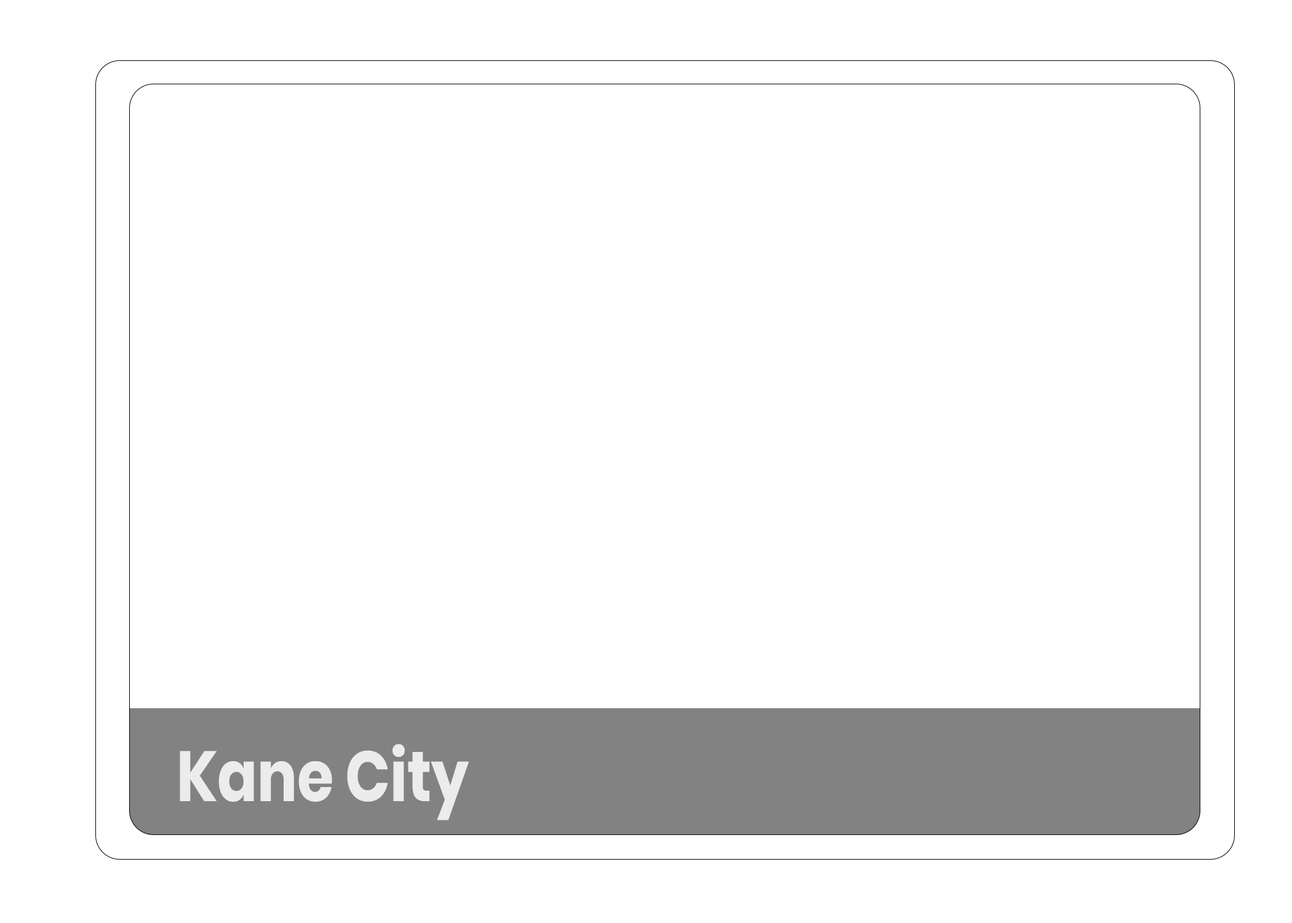
<style>
.page{position:relative;width:1292px;height:923px;background:#ffffff}
.page>*{position:absolute;margin:0}
.t1{font:70.8px "Poppins-Bold";color:#ececec;scale:0.83 1}
</style>
<div class="page">
<p class="t1" style="left:180px;top:744px;width:289px;height:76px">Kane City</p>
</div>
